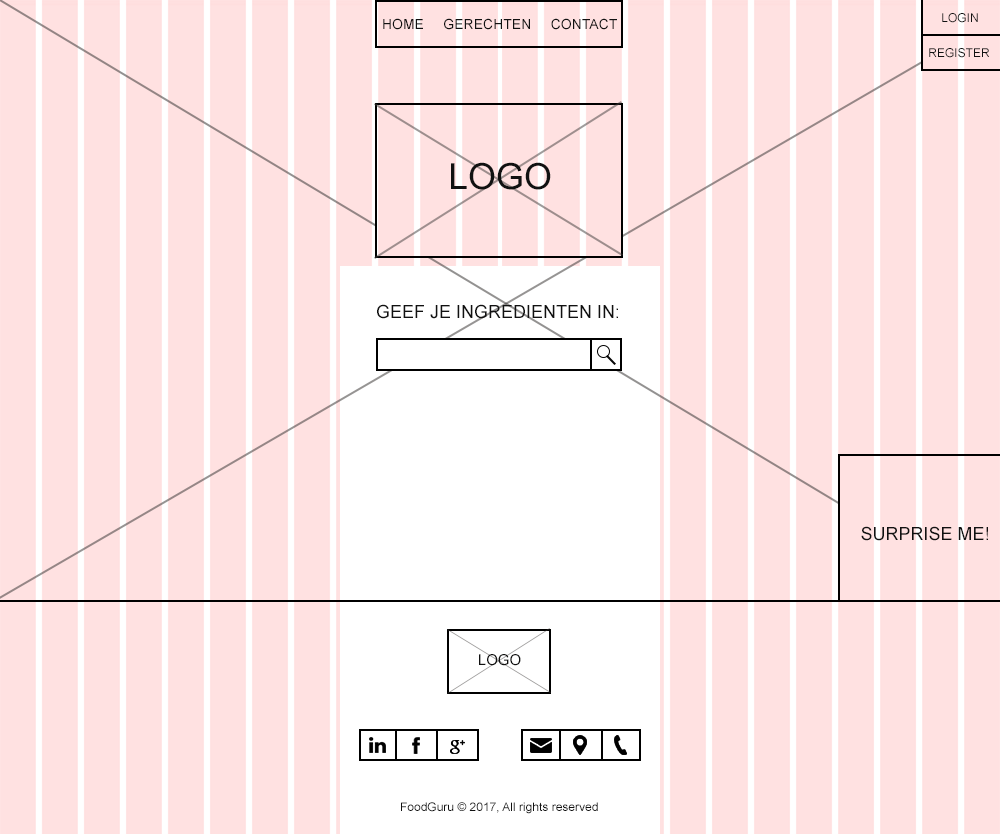
<style>
.page{position:relative;width:1000px;height:834px;background:#ffe1e1}
.page>*{position:absolute;margin:0}
.t1{font:12px "ArialMT";color:#111111}
.t2{font:14px "ArialMT";color:#111111}
.t3{font:36.1px "ArialMT";color:#111111}
.t4{font:18px "ArialMT";color:#111111}
.t5{font:15.1px "ArialMT";color:#111111}
.t6{font:11.8px "ArialMT";color:#111111}
</style>
<div class="page">
<p class="t1" style="left:942px;top:13px;width:36px;height:10px">LOGIN</p>
<p class="t2" style="left:383px;top:18px;width:234px;height:12px">HOME     GERECHTEN     CONTACT</p>
<p class="t1" style="left:929px;top:48px;width:60px;height:10px">REGISTER</p>
<p class="t3" style="left:451px;top:162px;width:100px;height:28px">LOGO</p>
<p class="t4" style="left:377px;top:304px;width:241px;height:15px">GEEF JE INGREDIENTEN IN:</p>
<p class="t4" style="left:861px;top:526px;width:127px;height:15px">SURPRISE ME!</p>
<p class="t5" style="left:479px;top:654px;width:42px;height:12px">LOGO</p>
<p class="t6" style="left:401px;top:802px;width:197px;height:12px">FoodGuru © 2017, All rights reserved</p>
</div>
